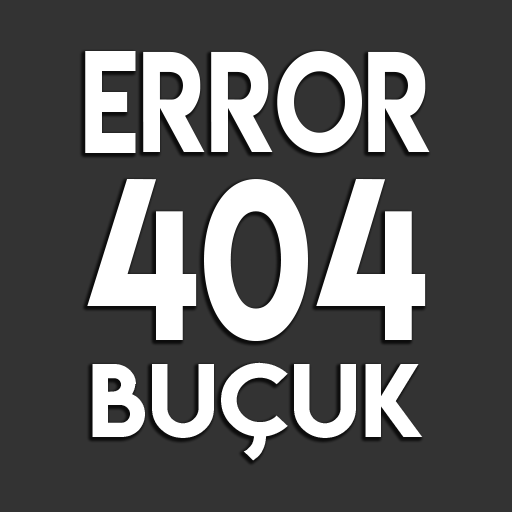
<style>
.page{position:relative;width:512px;height:512px;background:#333333}
.page>*{position:absolute;margin:0}
.t1{font:127px "LemonMilk";color:#ffffff;scale:0.83 1}
.t2{font:203.1px "LemonMilk";color:#ffffff;scale:0.83 1}
.t3{font:92.5px "LemonMilk";color:#ffffff;scale:1.06 1}
</style>
<div class="page">
<p class="t1" style="left:85px;top:51px;width:345px;height:102px">ERROR</p>
<p class="t2" style="left:87px;top:179px;width:339px;height:163px">404</p>
<p class="t3" style="left:92px;top:362px;width:331px;height:99px">buçuk</p>
</div>
